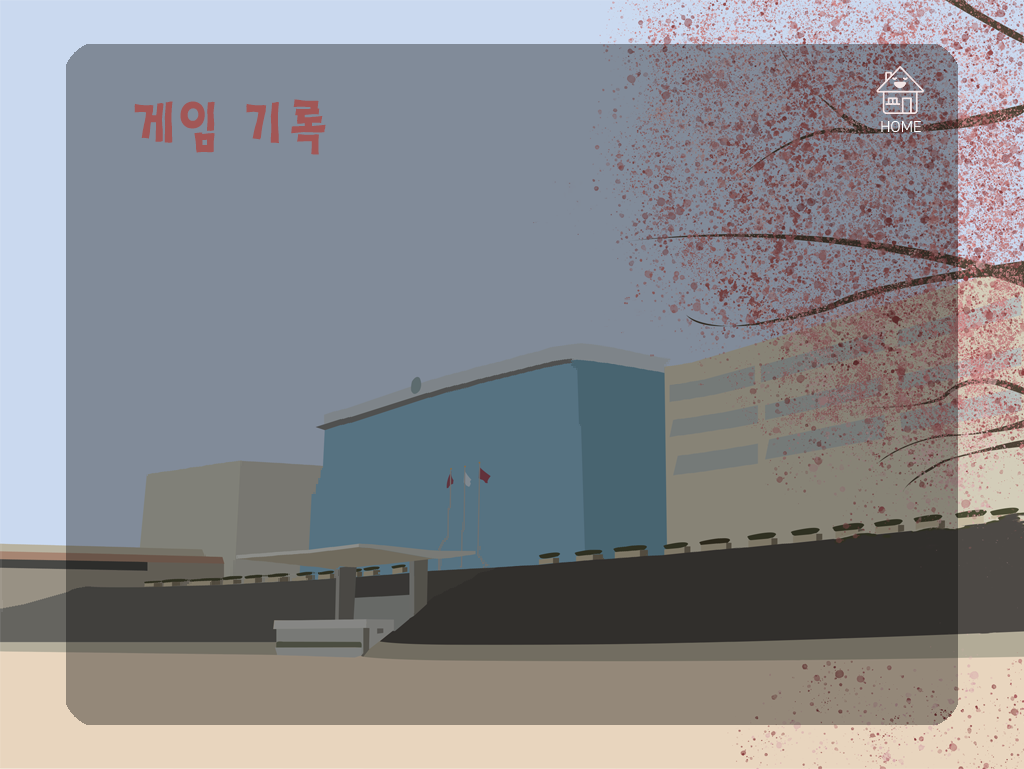
<style>
.page{position:relative;width:1024px;height:769px;background:#818b99}
.page>*{position:absolute;margin:0}
.t1{font:62.1px "HaanSaleB";color:#a15756;scale:0.9 1}
.t2{font:15px "NanumSquareOTFR";color:#fefefe}
</style>
<div class="page">
<p class="t1" style="left:134px;top:99px;width:192px;height:56px">게임 기록</p>
<p class="t2" style="left:881px;top:121px;width:40px;height:11px">HOME</p>
</div>
